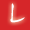
<style>
.page{position:relative;width:30px;height:30px;background:#d62629}
.page>*{position:absolute;margin:0}
.t1{font:26.7px "SketchFlowPrint";color:#ffffff}
</style>
<div class="page">
<p class="t1" style="left:10px;top:3px;width:15px;height:20px">L</p>
</div>
